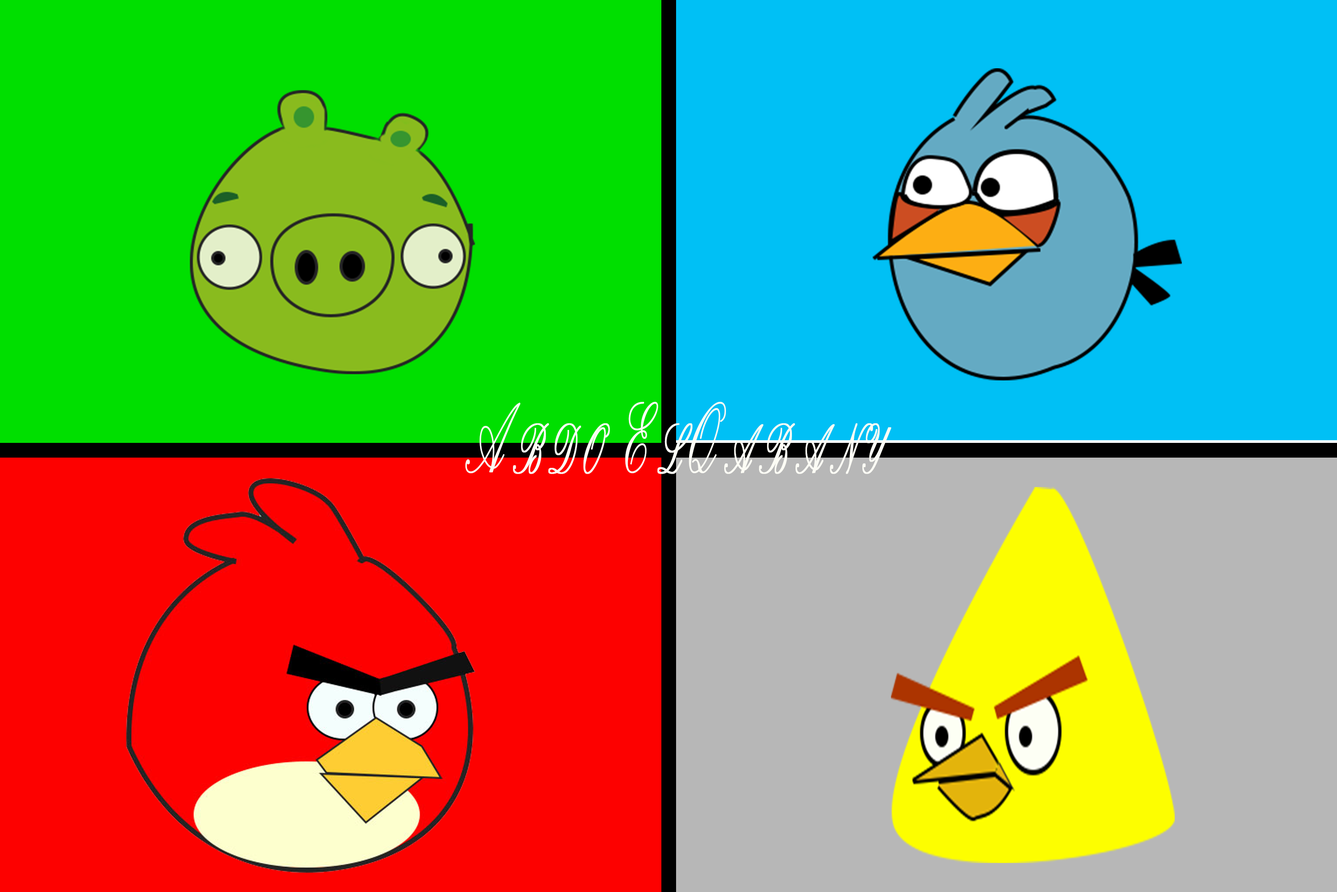
<style>
.page{position:relative;width:1337px;height:892px}
.page>*{position:absolute;margin:0}
.t1{font:126.1px "PalaceScriptMT";letter-spacing:0.1em;color:#fcfcf5;font-variant:small-caps;font-weight:bold;scale:0.46 1}
</style>
<div class="page">
<p class="t1" style="left:465px;top:401px;width:427px;height:73px">Abdo ElQabany</p>
</div>
